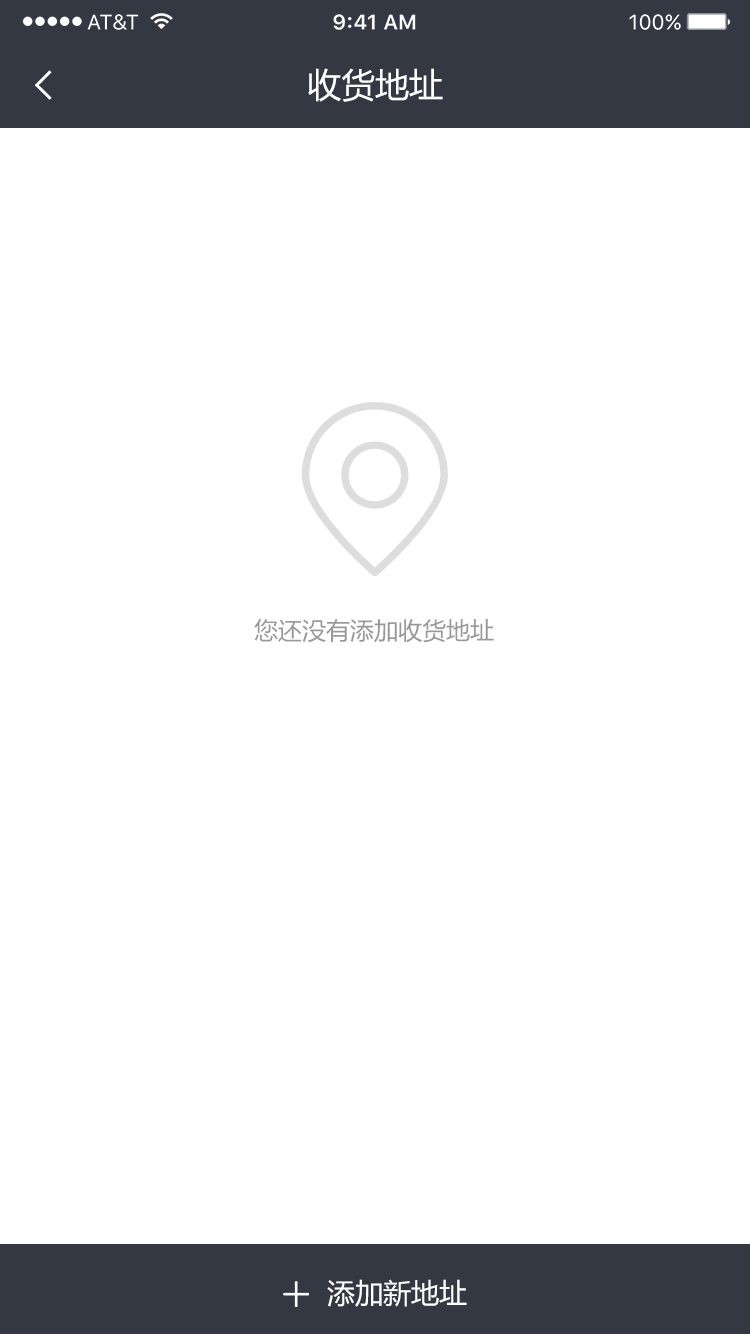
<style>
.page{position:relative;width:750px;height:1334px;background:#ffffff}
.page>*{position:absolute;margin:0}
.t1{font:34px "MicrosoftYaHei";color:#ffffff}
.t2{font:24px "MicrosoftYaHei";color:#999999}
.t3{font:28px "MicrosoftYaHei";color:#ffffff}
</style>
<div class="page">
<p class="t1" style="left:308px;top:68px;width:135px;height:34px">收货地址</p>
<p class="t2" style="left:254px;top:618px;width:240px;height:25px">您还没有添加收货地址</p>
<p class="t3" style="left:327px;top:1279px;width:140px;height:28px">添加新地址</p>
</div>
